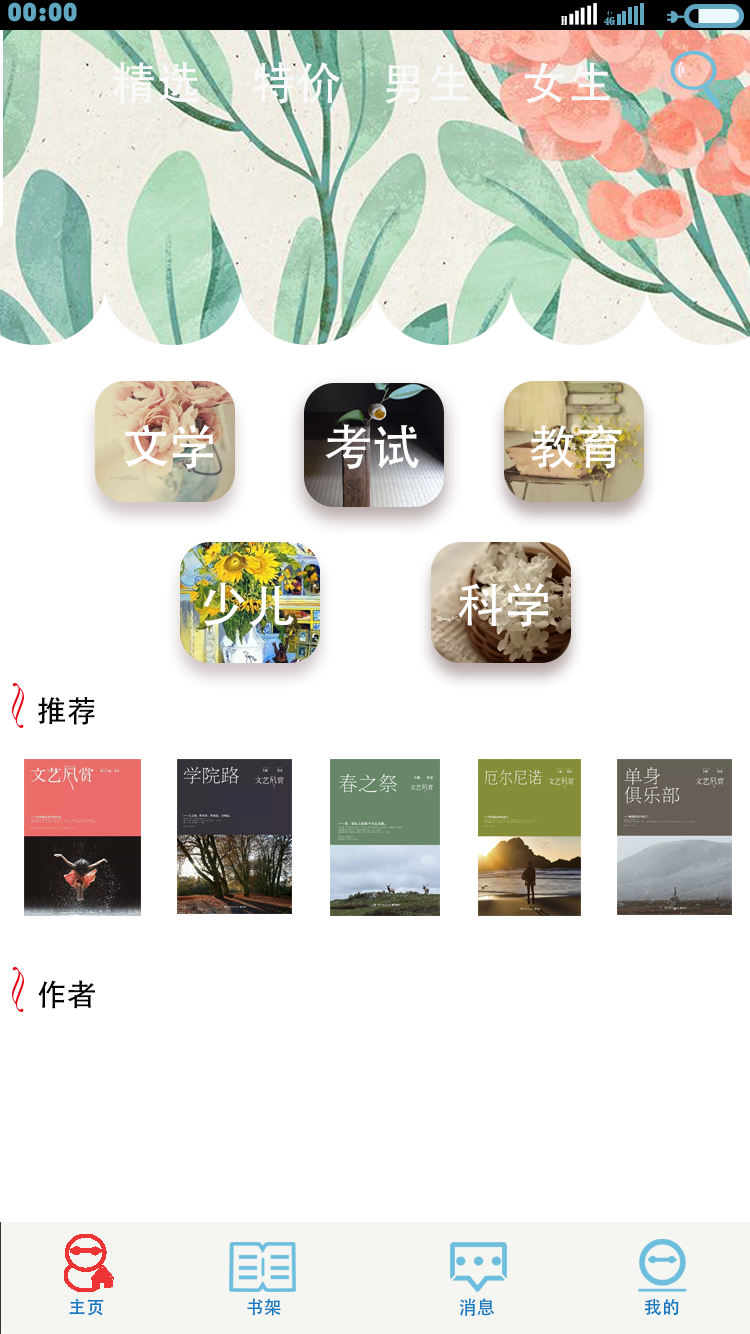
<style>
.page{position:relative;width:750px;height:1334px;background:#ffffff}
.page>*{position:absolute;margin:0}
.t1{font:45px "AdobeHeitiStd-Regular";color:#f8f9f8}
.t2{font:48px "AdobeHeitiStd-Regular";color:#ffffff}
.t3{font:30px "AdobeHeitiStd-Regular";color:#030303}
.t4{font:18px "AdobeHeitiStd-Regular";color:#137bc4}
</style>
<div class="page">
<p class="t1" style="left:113px;top:62px;width:497px;height:42px">精选     特价    男生     女生</p>
<p class="t2" style="left:125px;top:424px;width:497px;height:45px">文学          考试          教育</p>
<p class="t2" style="left:203px;top:582px;width:345px;height:45px">少儿               科学</p>
<p class="t3" style="left:38px;top:697px;width:57px;height:28px">推荐</p>
<p class="t3" style="left:38px;top:980px;width:57px;height:29px">作者</p>
<p class="t4" style="left:69px;top:1298px;width:610px;height:18px">主页                                   书架                                            消息                                     我的</p>
</div>
